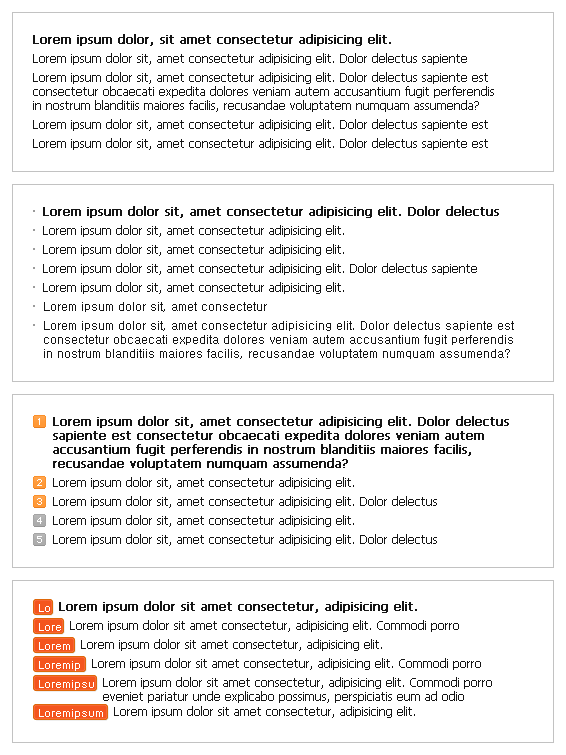
<style>
.page{position:relative;width:566px;height:755px;background:#ffffff}
.page>*{position:absolute;margin:0}
.t1{font:12px "Tahoma";color:#151515;font-weight:bold}
.t2{font:12px "Tahoma";color:#151515}
.t3{font:12px/14px "Tahoma";color:#151515}
.t4{font:12px "Dotum";color:#151515}
.t5{font:12px/14px "Dotum";color:#151515}
.t6{font:12px/14px "Tahoma";color:#151515;font-weight:bold}
.t7{font:12px/19px "Tahoma";color:#151515}
.t8{font:12px/19px "Dotum";color:#151515;font-weight:bold}
.t9{font:11px "Dotum";color:#ffffff}
</style>
<div class="page">
<p class="t1" style="left:33px;top:34px;width:358px;height:12px">Lorem ipsum dolor, sit amet consectetur adipisicing elit.</p>
<p class="t2" style="left:33px;top:53px;width:434px;height:12px">Lorem ipsum dolor sit, amet consectetur adipisicing elit. Dolor delectus sapiente</p>
<p class="t3" style="left:33px;top:72px;width:461px;height:40px">Lorem ipsum dolor sit, amet consectetur adipisicing elit. Dolor delectus sapiente est <br>consectetur obcaecati expedita dolores veniam autem accusantium fugit perferendis <br>in nostrum blanditiis maiores facilis, recusandae voluptatem numquam assumenda?</p>
<p class="t2" style="left:33px;top:119px;width:455px;height:12px">Lorem ipsum dolor sit, amet consectetur adipisicing elit. Dolor delectus sapiente est</p>
<p class="t2" style="left:33px;top:138px;width:455px;height:12px">Lorem ipsum dolor sit, amet consectetur adipisicing elit. Dolor delectus sapiente est</p>
<p class="t1" style="left:43px;top:206px;width:456px;height:12px">Lorem ipsum dolor sit, amet consectetur adipisicing elit. Dolor delectus</p>
<p class="t2" style="left:43px;top:225px;width:301px;height:12px">Lorem ipsum dolor sit, amet consectetur adipisicing elit.</p>
<p class="t2" style="left:43px;top:244px;width:301px;height:12px">Lorem ipsum dolor sit, amet consectetur adipisicing elit.</p>
<p class="t2" style="left:43px;top:263px;width:434px;height:12px">Lorem ipsum dolor sit, amet consectetur adipisicing elit. Dolor delectus sapiente</p>
<p class="t2" style="left:43px;top:282px;width:301px;height:12px">Lorem ipsum dolor sit, amet consectetur adipisicing elit.</p>
<p class="t4" style="left:44px;top:302px;width:223px;height:10px">Lorem ipsum dolor sit, amet consectetur</p>
<p class="t5" style="left:44px;top:321px;width:470px;height:38px">Lorem ipsum dolor sit, amet consectetur adipisicing elit. Dolor delectus sapiente est<br>consectetur obcaecati expedita dolores veniam autem accusantium fugit perferendis <br>in nostrum blanditiis maiores facilis, recusandae voluptatem numquam assumenda?</p>
<p class="t6" style="left:53px;top:416px;width:456px;height:54px">Lorem ipsum dolor sit, amet consectetur adipisicing elit. Dolor delectus<br>sapiente est consectetur obcaecati expedita dolores veniam autem <br>accusantium fugit perferendis in nostrum blanditiis maiores facilis, <br>recusandae voluptatem numquam assumenda?</p>
<p class="t7" style="left:53px;top:477px;width:384px;height:69px"><span class="t8"><br><br></span>Lorem ipsum dolor sit, amet consectetur adipisicing elit.<br>Lorem ipsum dolor sit, amet consectetur adipisicing elit. Dolor delectus<br>Lorem ipsum dolor sit, amet consectetur adipisicing elit.<br>Lorem ipsum dolor sit, amet consectetur adipisicing elit. Dolor delectus</p>
<p class="t9" style="left:39px;top:604px;width:11px;height:8px">Lo</p>
<p class="t1" style="left:59px;top:601px;width:358px;height:12px">Lorem ipsum dolor sit amet consectetur, adipisicing elit.</p>
<p class="t9" style="left:39px;top:623px;width:22px;height:8px">Lore</p>
<p class="t2" style="left:70px;top:620px;width:389px;height:12px">Lorem ipsum dolor sit amet consectetur, adipisicing elit. Commodi porro</p>
<p class="t2" style="left:81px;top:639px;width:301px;height:12px">Lorem ipsum dolor sit amet consectetur, adipisicing elit.</p>
<p class="t9" style="left:39px;top:642px;width:31px;height:8px">Lorem</p>
<p class="t9" style="left:39px;top:661px;width:41px;height:10px">Loremip</p>
<p class="t2" style="left:92px;top:658px;width:389px;height:12px">Lorem ipsum dolor sit amet consectetur, adipisicing elit. Commodi porro</p>
<p class="t3" style="left:103px;top:677px;width:389px;height:26px">Lorem ipsum dolor sit amet consectetur, adipisicing elit. Commodi porro <br>eveniet pariatur unde explicabo possimus, perspiciatis eum ad odio</p>
<p class="t9" style="left:39px;top:680px;width:55px;height:10px">Loremipsu</p>
<p class="t9" style="left:39px;top:709px;width:64px;height:10px">Loremipsum</p>
<p class="t2" style="left:114px;top:706px;width:301px;height:12px">Lorem ipsum dolor sit amet consectetur, adipisicing elit.</p>
</div>
